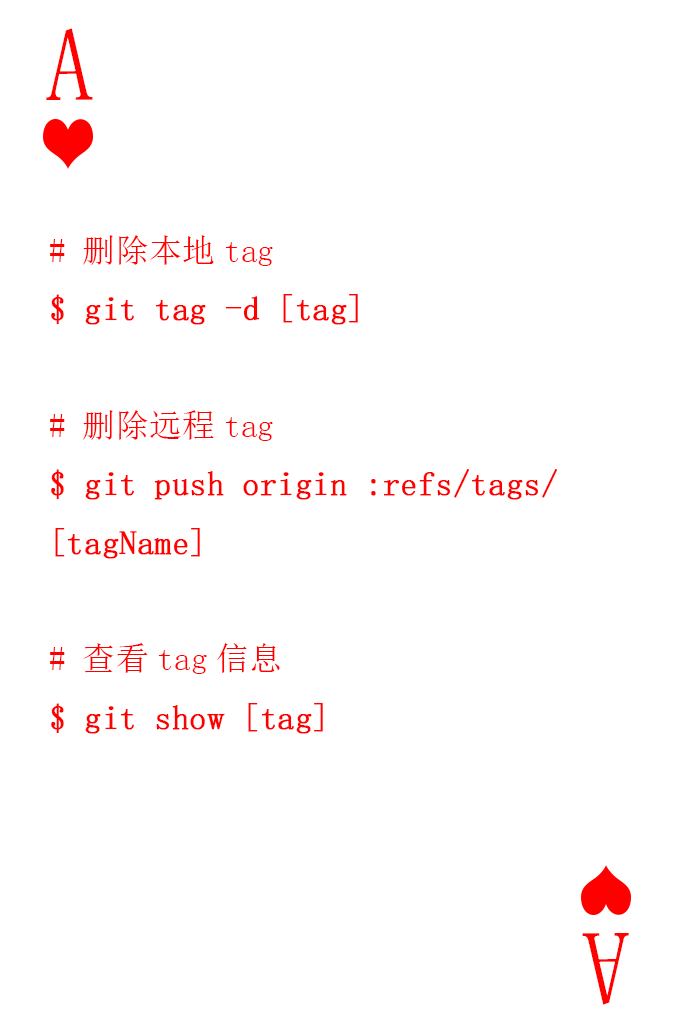
<style>
.page{position:relative;width:673px;height:1028px;background:#ffffff}
.page>*{position:absolute;margin:0}
.t1{font:104.2px "SimSun-ExtB";color:#ff0101;scale:0.93 1}
.t2{font:33.3px "SimSun";color:#ff0000;font-weight:bold}
.t3{font:33.3px "SimSun";color:#ff0000}
</style>
<div class="page">
<p class="t1" style="left:46px;top:28px;width:47px;height:72px">A</p>
<p class="t2" style="left:50px;top:235px;width:507px;height:499px"><span class="t3"># 删除本地tag<br></span>$ git tag -d [tag]<br><span class="t3"><br># 删除远程tag<br></span>$ git push origin :refs/tags/<br>[tagName]<br><span class="t3"><br># 查看tag信息<br></span>$ git show [tag]</p>
<p class="t1" style="left:582px;top:933px;width:47px;height:72px;rotate:180deg">A</p>
</div>
